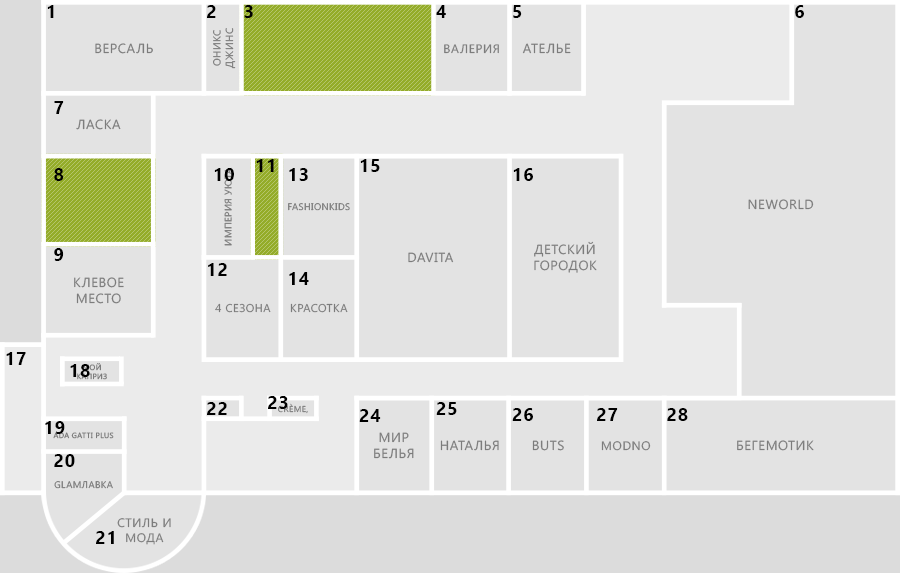
<style>
.page{position:relative;width:900px;height:573px;background:#e3e3e3}
.page>*{position:absolute;margin:0}
.t1{font:18px "SegoeUI-Bold";letter-spacing:0.05em;color:#000000;text-transform:uppercase}
.t2{font:10.3px "SegoeUI";letter-spacing:0.05em;color:#7c7c7c;text-transform:uppercase}
.t3{font:13.1px "SegoeUI";letter-spacing:0.05em;color:#7c7c7c;text-transform:uppercase}
.t4{font:12.2px "SegoeUI";letter-spacing:0.05em;color:#7c7c7c;text-transform:uppercase}
.t5{font:9.4px "SegoeUI";letter-spacing:0.05em;color:#7c7c7c;text-transform:uppercase}
.t6{font:9.4px "SegoeUI";letter-spacing:0.05em;text-transform:uppercase}
.t7{font:11.3px "SegoeUI";letter-spacing:0.05em;color:#7c7c7c;text-transform:uppercase}
.t8{font:7.5px "SegoeUI";letter-spacing:0.05em;color:#7c7c7c;text-transform:uppercase}
.t9{font:8.4px "SegoeUI";letter-spacing:0.05em;text-transform:uppercase}
</style>
<div class="page">
<p class="t1" style="left:47px;top:5px;width:7px;height:13px">1</p>
<p class="t1" style="left:207px;top:5px;width:9px;height:13px">2</p>
<p class="t1" style="left:244px;top:5px;width:9px;height:13px">3</p>
<p class="t1" style="left:436px;top:5px;width:10px;height:13px">4</p>
<p class="t1" style="left:513px;top:5px;width:9px;height:13px">5</p>
<p class="t1" style="left:795px;top:5px;width:9px;height:13px">6</p>
<p class="t2" style="left:213px;top:28px;width:23px;height:41px;text-align:center;rotate:-90deg">Оникс<br>Джинс</p>
<p class="t3" style="left:95px;top:43px;width:58px;height:11px">Версаль</p>
<p class="t4" style="left:444px;top:44px;width:55px;height:10px">Валерия</p>
<p class="t3" style="left:522px;top:43px;width:49px;height:11px">Ателье</p>
<p class="t1" style="left:54px;top:101px;width:10px;height:13px">7</p>
<p class="t3" style="left:76px;top:119px;width:45px;height:11px">Ласка</p>
<p class="t1" style="left:256px;top:159px;width:18px;height:13px">11</p>
<p class="t1" style="left:360px;top:159px;width:20px;height:13px">15</p>
<p class="t1" style="left:54px;top:168px;width:10px;height:13px">8</p>
<p class="t1" style="left:214px;top:168px;width:20px;height:13px">10</p>
<p class="t5" style="left:224px;top:167px;width:8px;height:79px;rotate:-90deg">Империя уюта</p>
<p class="t1" style="left:289px;top:168px;width:19px;height:13px">13</p>
<p class="t1" style="left:513px;top:168px;width:20px;height:13px">16</p>
<p class="t6" style="left:288px;top:203px;width:62px;height:8px">Fashionkids</p>
<p class="t3" style="left:748px;top:199px;width:66px;height:11px">NeWorld</p>
<p class="t3" style="left:534px;top:241px;width:63px;height:32px;text-align:center">Детский<br>городок</p>
<p class="t1" style="left:54px;top:248px;width:10px;height:13px">9</p>
<p class="t3" style="left:408px;top:252px;width:46px;height:11px">DaVita</p>
<p class="t1" style="left:208px;top:263px;width:19px;height:13px">12</p>
<p class="t3" style="left:74px;top:277px;width:50px;height:27px;text-align:center">Клевое<br>место</p>
<p class="t1" style="left:289px;top:272px;width:20px;height:13px">14</p>
<p class="t7" style="left:215px;top:303px;width:56px;height:10px">4 сезона</p>
<p class="t7" style="left:290px;top:303px;width:58px;height:10px">Красотка</p>
<p class="t1" style="left:6px;top:352px;width:20px;height:13px">17</p>
<p class="t1" style="left:70px;top:364px;width:20px;height:13px">18</p>
<p class="t8" style="left:77px;top:363px;width:30px;height:17px;text-align:center">Мой<br>каприз</p>
<p class="t1" style="left:268px;top:396px;width:20px;height:13px">23</p>
<p class="t1" style="left:207px;top:402px;width:20px;height:13px">22</p>
<p class="t9" style="left:278px;top:403px;width:30px;height:11px">Crème,</p>
<p class="t1" style="left:359px;top:409px;width:22px;height:13px">24</p>
<p class="t1" style="left:436px;top:402px;width:21px;height:13px">25</p>
<p class="t1" style="left:512px;top:408px;width:21px;height:13px">26</p>
<p class="t1" style="left:597px;top:408px;width:21px;height:13px">27</p>
<p class="t1" style="left:667px;top:408px;width:21px;height:13px">28</p>
<p class="t1" style="left:45px;top:421px;width:20px;height:13px">19</p>
<p class="t8" style="left:53px;top:432px;width:61px;height:7px">Ada gatti plus</p>
<p class="t3" style="left:374px;top:432px;width:40px;height:27px;text-align:center">Мир<br>белья</p>
<p class="t3" style="left:440px;top:440px;width:59px;height:11px">Наталья</p>
<p class="t3" style="left:532px;top:440px;width:32px;height:11px">Buts</p>
<p class="t4" style="left:601px;top:441px;width:50px;height:10px">MODNO</p>
<p class="t3" style="left:737px;top:440px;width:77px;height:11px">Бегемотик</p>
<p class="t1" style="left:54px;top:454px;width:21px;height:13px">20</p>
<p class="t6" style="left:54px;top:481px;width:59px;height:8px">Glamлавка</p>
<p class="t4" style="left:117px;top:518px;width:54px;height:27px;text-align:center">Стиль и<br>мода</p>
<p class="t1" style="left:96px;top:531px;width:18px;height:13px">21</p>
</div>
